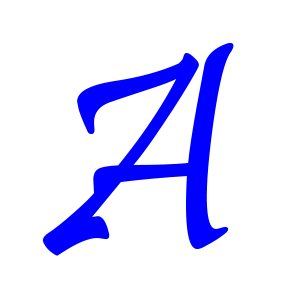
<style>
.page{position:relative;width:300px;height:300px;background:#ffffff}
.page>*{position:absolute;margin:0}
.t1{font:300px "Pristina-Regular";color:#0000ff}
</style>
<div class="page">
<p class="t1" style="left:42px;top:42px;width:192px;height:214px">A</p>
</div>
